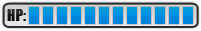
<style>
.page{position:relative;width:201px;height:31px}
.page>*{position:absolute;margin:0}
.t1{font:15px "Impact";color:#121212}
</style>
<div class="page">
<p class="t1" style="left:7px;top:9px;width:19px;height:12px">HP:</p>
</div>
